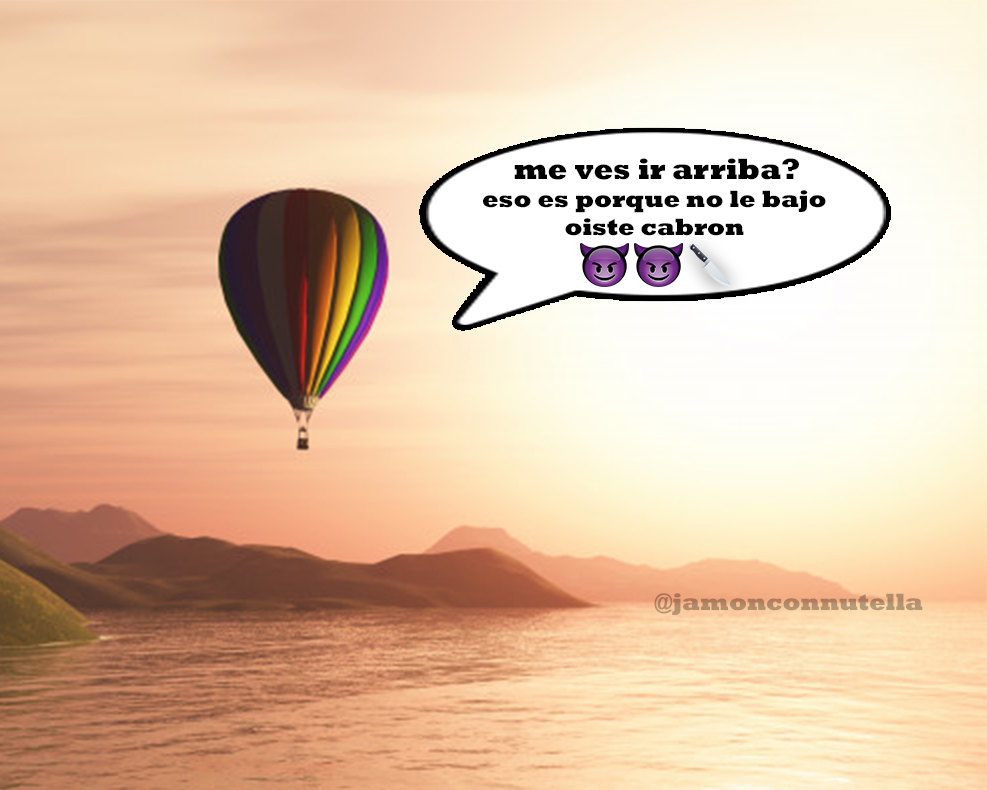
<style>
.page{position:relative;width:987px;height:790px}
.page>*{position:absolute;margin:0}
.t1{font:29.8px "Rockwell-ExtraBold";color:#000000;scale:0.95 1}
.t2{font:24px "Rockwell-ExtraBold";color:#000000}
.t3{font:24px "Rockwell-ExtraBold";color:#b38c6c}
</style>
<div class="page">
<p class="t1" style="left:514px;top:158px;width:285px;height:22px">me ves ir arriba?</p>
<p class="t2" style="left:483px;top:190px;width:343px;height:46px;text-align:center">eso es porque no le bajo<br>oiste cabron</p>
<p class="t3" style="left:654px;top:593px;width:269px;height:22px">@jamonconnutella</p>
</div>
